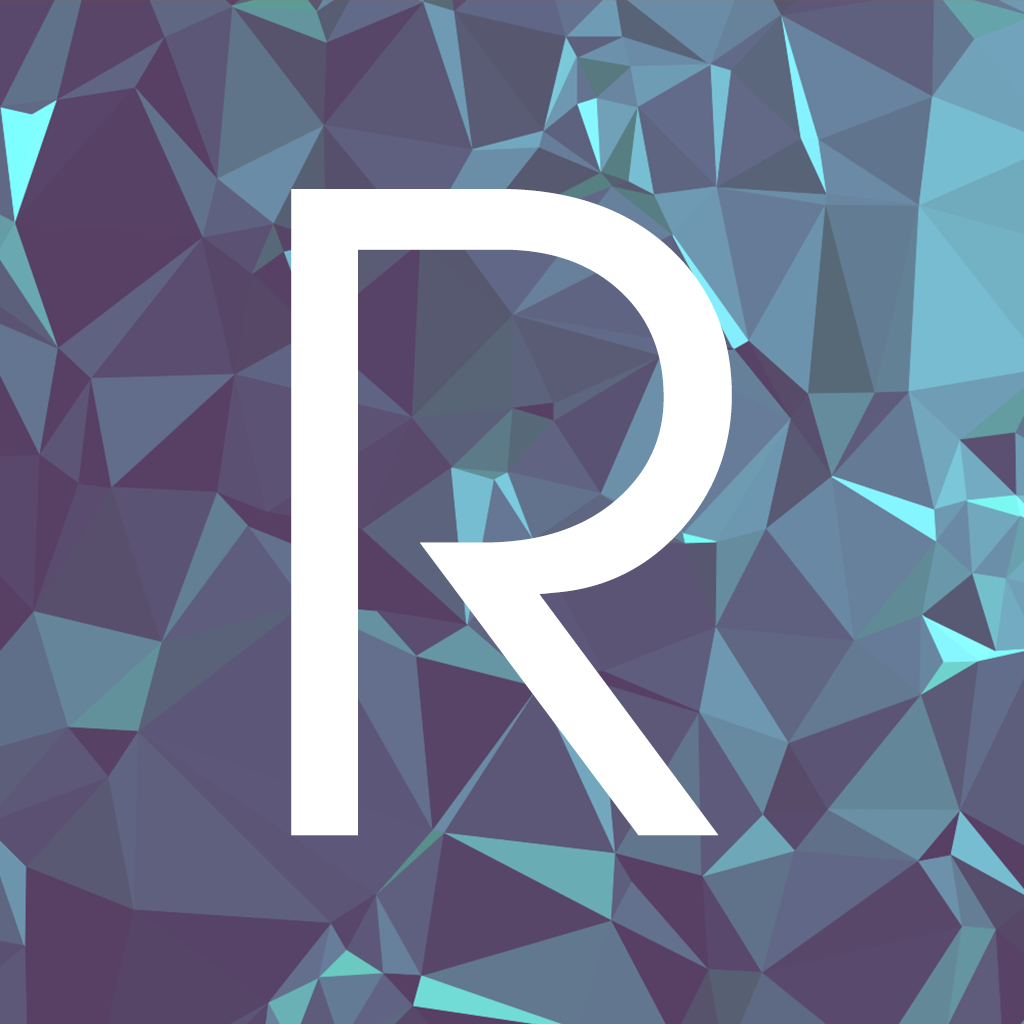
<style>
.page{position:relative;width:1024px;height:1024px}
.page>*{position:absolute;margin:0}
.t1{font:840px "AbeatbyKai";color:#ffffff}
</style>
<div class="page">
<p class="t1" style="left:291px;top:189px;width:441px;height:647px">R</p>
</div>
